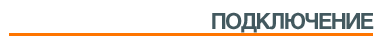
<style>
.page{position:relative;width:380px;height:39px;background:#ffffff}
.page>*{position:absolute;margin:0}
.t1{font:22.1px "Helios-Bold";letter-spacing:-0.08em;color:#43595f;text-transform:uppercase}
</style>
<div class="page">
<p class="t1" style="left:212px;top:12px;width:162px;height:21px">Подключение</p>
</div>
